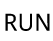
<style>
.page{position:relative;width:53px;height:41px;background:#ffffff}
.page>*{position:absolute;margin:0}
.t1{font:23.7px "DroidSans";color:#000000}
</style>
<div class="page">
<p class="t1" style="left:5px;top:13px;width:45px;height:18px">RUN</p>
</div>
